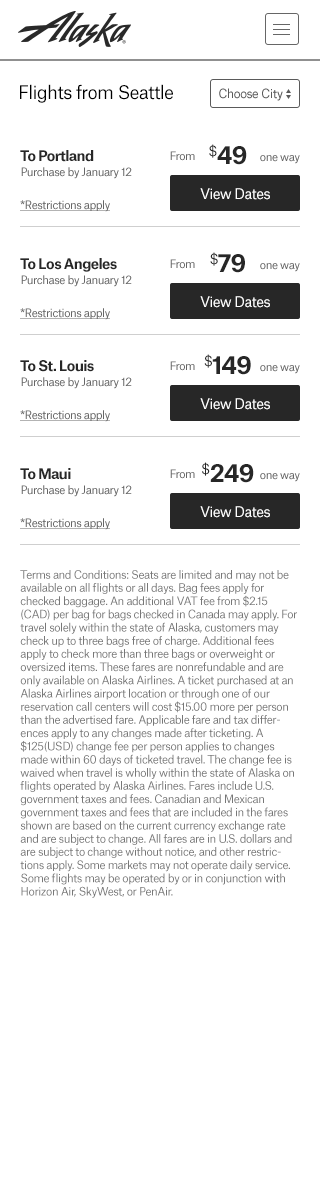
<style>
.page{position:relative;width:320px;height:1200px;background:#ffffff}
.page>*{position:absolute;margin:0}
.t1{font:18px "AtlasGrotesk-Regular";letter-spacing:-0.04em;color:#000000}
.t2{font:14px "AtlasGrotesk-Bold";letter-spacing:-0.04em;color:#272727}
.t3{font:24px "AtlasGrotesk-Bold";letter-spacing:-0.04em;color:#272727}
.t4{font:24px "AtlasGrotesk-Regular";letter-spacing:-0.04em;color:#272727}
.t5{font:11px "AtlasGrotesk-Regular";letter-spacing:-0.04em;color:#777777}
</style>
<div class="page">
<p class="t1" style="left:20px;top:84px;width:93px;height:19px">Flights from</p>
<p class="t1" style="left:119px;top:84px;width:54px;height:16px">Seattle</p>
<p class="t2" style="left:20px;top:150px;width:74px;height:12px">To Portland</p>
<p class="t3" style="left:209px;top:144px;width:38px;height:21px"><span class="t4">$</span>49</p>
<p class="t3" style="left:210px;top:252px;width:35px;height:21px"><span class="t4">$</span>79</p>
<p class="t2" style="left:20px;top:258px;width:97px;height:14px">To Los Angeles</p>
<p class="t2" style="left:20px;top:360px;width:74px;height:12px">To St. Louis</p>
<p class="t3" style="left:204px;top:354px;width:47px;height:21px"><span class="t4">$</span>149</p>
<p class="t3" style="left:202px;top:462px;width:52px;height:21px"><span class="t4">$</span>249</p>
<p class="t2" style="left:20px;top:468px;width:51px;height:12px">To Maui</p>
<p class="t5" style="left:20px;top:570px;width:277px;height:328px">Terms and Conditions: Seats are limited and may not be available on all flights or all days. Bag fees apply for checked baggage. An additional VAT fee from $2.15 (CAD) per bag for bags checked in Canada may apply. For travel solely within the state of Alaska, customers may check up to three bags free of charge. Additional fees apply to check more than three bags or overweight or oversized items. These fares are nonrefundable and are only available on Alaska Airlines. A ticket purchased at an Alaska Airlines airport location or through one of our reservation call centers will cost $15.00 more per person than the advertised fare. Applicable fare and tax differences apply to any changes made after ticketing. A $125(USD) change fee per person applies to changes made within 60 days of ticketed travel. The change fee is waived when travel is wholly within the state of Alaska on flights operated by Alaska Airlines. Fares include U.S. government taxes and fees. Canadian and Mexican government taxes and fees that are included in the fares shown are based on the current currency exchange rate and are subject to change. All fares are in U.S. dollars and are subject to change without notice, and other restrictions apply. Some markets may not operate daily service. Some flights may be operated by or in conjunction with Horizon Air, SkyWest, or PenAir.</p>
</div>
